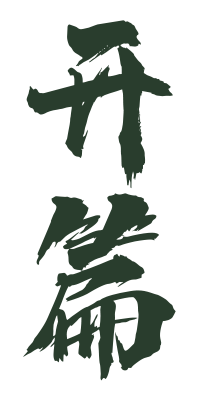
<style>
.page{position:relative;width:200px;height:400px;background:#ffffff}
.page>*{position:absolute;margin:0}
.t1{font:200px "Î´¶¨Òå";color:#293d2d}
</style>
<div class="page">
<p class="t1" style="left:23px;top:20px;width:153px;height:361px">开篇</p>
</div>
